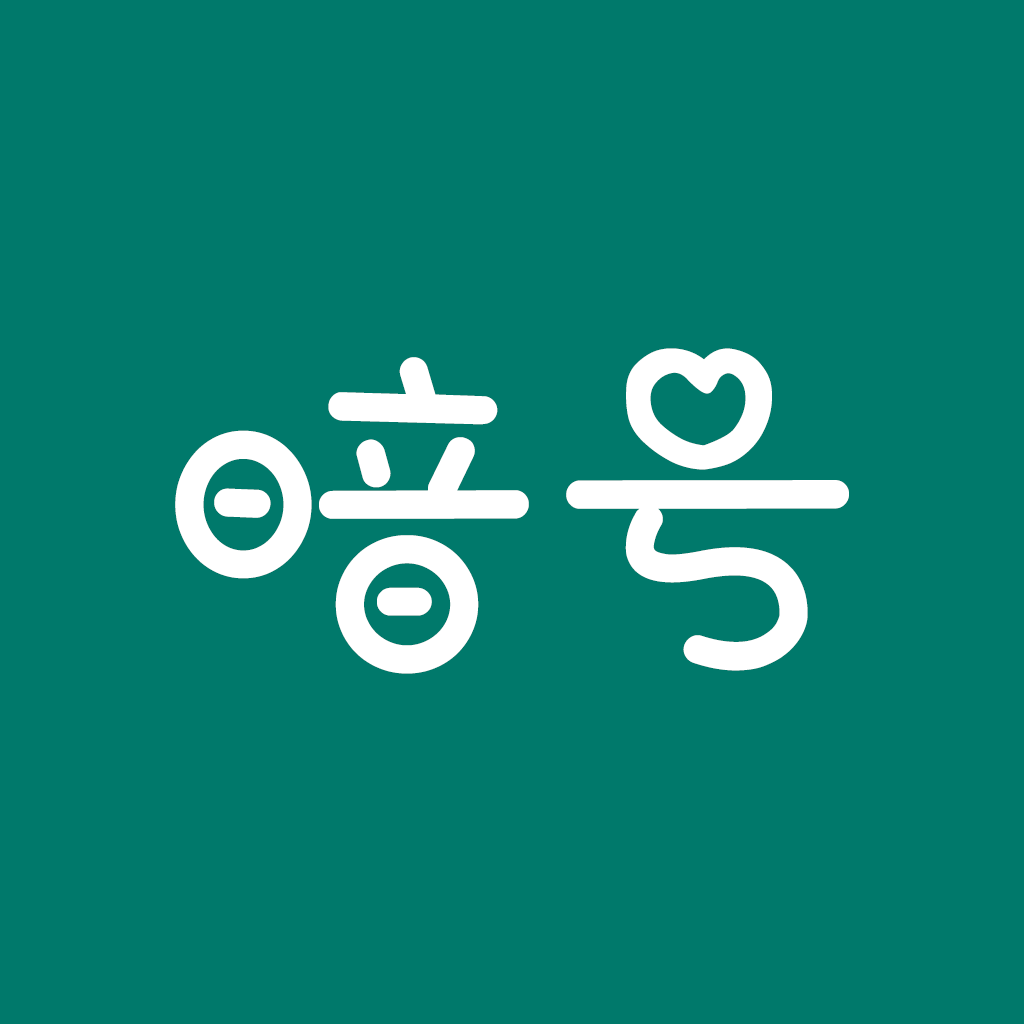
<style>
.page{position:relative;width:1024px;height:1024px;background:#00796b}
.page>*{position:absolute;margin:0}
.t1{font:384px "---";letter-spacing:-0.04em;color:#ffffff}
</style>
<div class="page">
<p class="t1" style="left:175px;top:348px;width:674px;height:326px">暗号</p>
</div>
